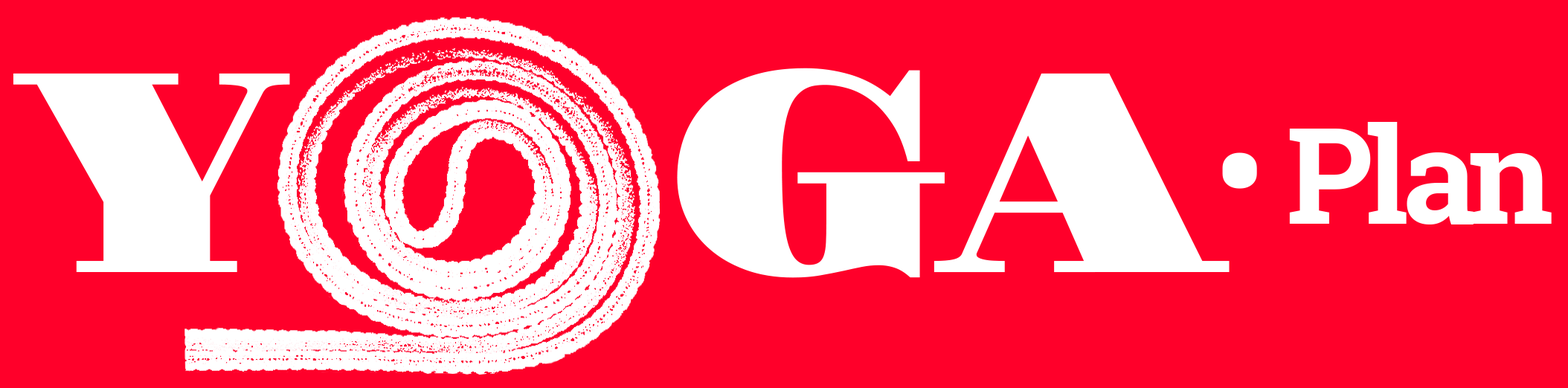
<style>
.page{position:relative;width:1568px;height:388px;background:#ff002a}
.page>*{position:absolute;margin:0}
.t1{font:287.1px "GravitasOne";letter-spacing:-0.06em;color:#ffffff;scale:1.1 1}
.t2{font:133.9px "RobotoSlab-Bold";letter-spacing:-0.05em;color:#ffffff}
.t3{font:133.9px "RobotoSlab-Bold";letter-spacing:-0.05em;color:#ffffff;scale:1.1 1}
</style>
<div class="page">
<p class="t1" style="left:13px;top:68px;width:1217px;height:210px">Y    GA</p>
<p class="t2" style="left:1222px;top:122px;width:330px;height:103px"><span class="t3">• </span>Plan</p>
</div>
